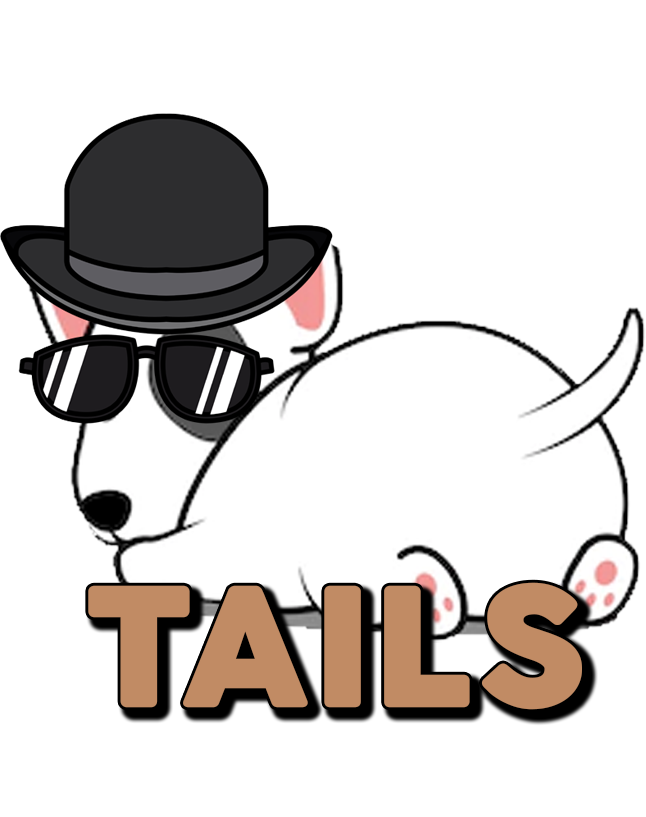
<style>
.page{position:relative;width:646px;height:817px;background:#ffffff}
.page>*{position:absolute;margin:0}
.t1{font:157.5px "Cocogoose";color:#c18b64;font-weight:bold;scale:1.05 1}
</style>
<div class="page">
<p class="t1" style="left:88px;top:582px;width:494px;height:128px">TAILS</p>
</div>
